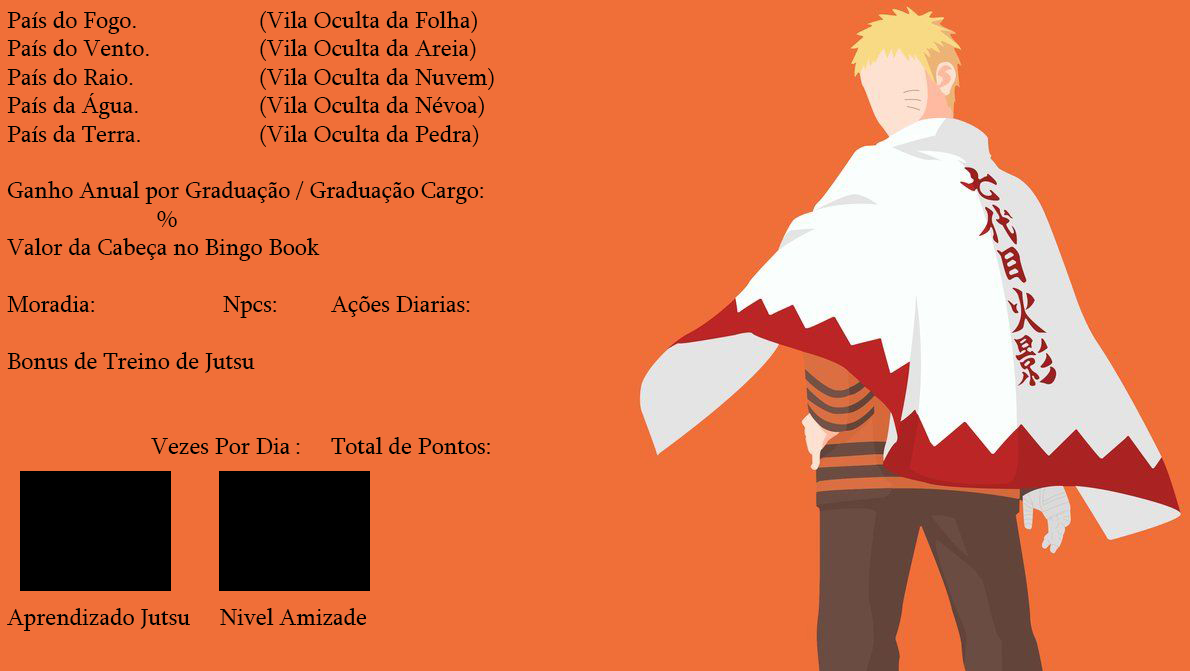
<style>
.page{position:relative;width:1190px;height:671px;background:#f06f38}
.page>*{position:absolute;margin:0}
.t1{font:23.7px "Sylfaen";color:#000000}
</style>
<div class="page">
<p class="t1" style="left:7px;top:11px;width:487px;height:620px;text-align:right">País do Fogo.      (Vila Oculta da Folha)<br>País do Vento.     (Vila Oculta da Areia)<br>País do Raio.       (Vila Oculta da Nuvem)<br>País da Água.        (Vila Oculta da Névoa)<br>País da Terra.      (Vila Oculta da Pedra)<br><br>Ganho Anual por Graduação / Graduação Cargo: <br>     %<br>Valor da Cabeça no Bingo Book<br><br>Moradia:    Npcs:  Ações Diarias:<br><br>Bonus de Treino de Jutsu<br>      <br>    <br>    Vezes Por Dia : Total de Pontos:<br><br><br><br><br><br>Aprendizado Jutsu     Nivel Amizade</p>
</div>
